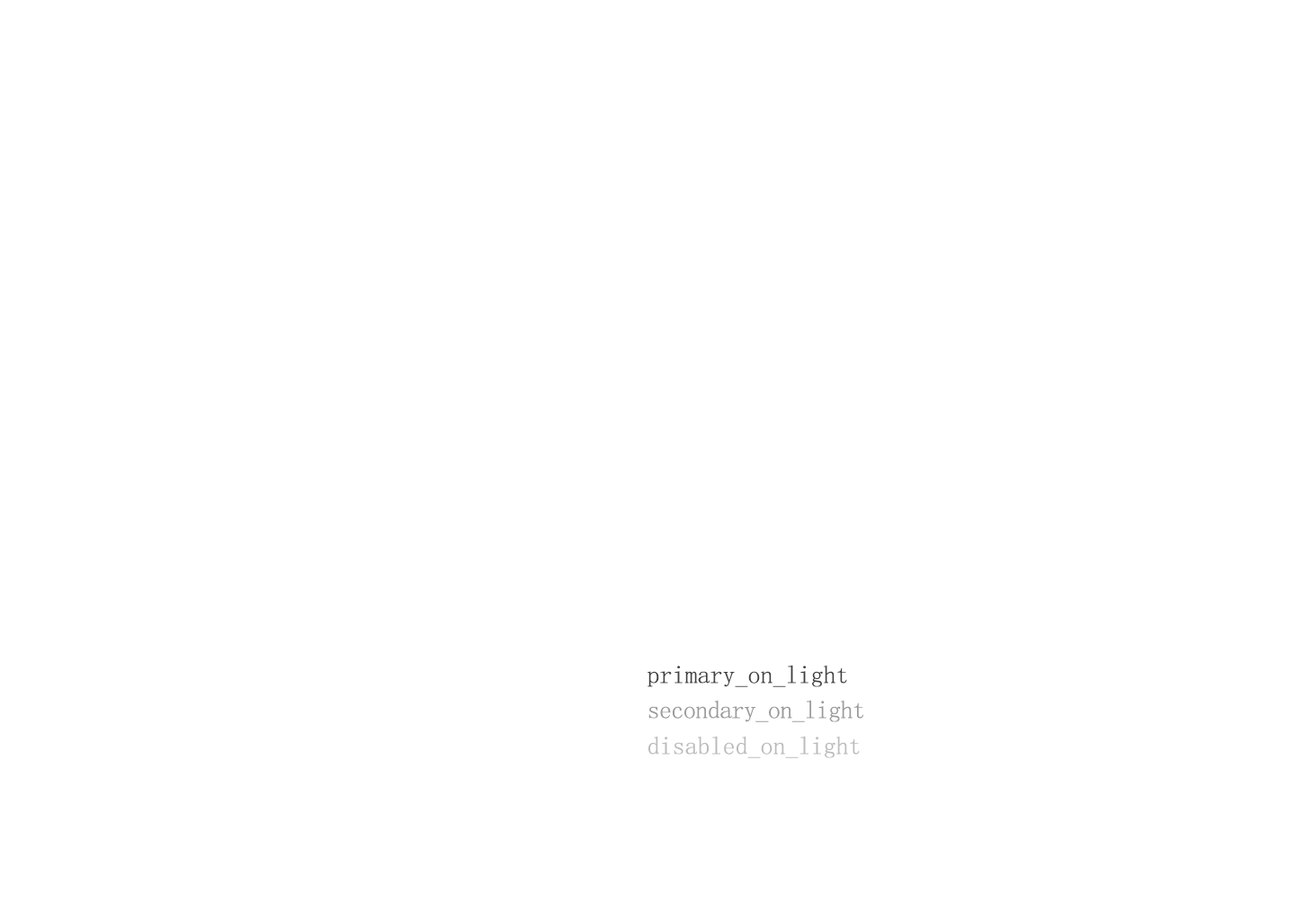
<style>
.page{position:relative;width:1295px;height:921px;background:#ffffff}
.page>*{position:absolute;margin:0}
.t1{font:25.2px "NSimSun";color:#404040}
.t2{font:25.2px "NSimSun";color:#9a9a9a}
.t3{font:25.2px "NSimSun";color:#bbbbbb}
</style>
<div class="page">
<p class="t1" style="left:647px;top:665px;width:200px;height:22px">primary_on_light</p>
<p class="t2" style="left:648px;top:700px;width:215px;height:22px">secondary_on_light</p>
<p class="t3" style="left:648px;top:736px;width:212px;height:22px">disabled_on_light</p>
</div>
